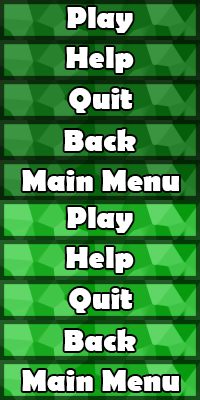
<style>
.page{position:relative;width:200px;height:400px}
.page>*{position:absolute;margin:0}
.t1{font:30px "BerlinSansFB-Bold";color:#ffffff}
</style>
<div class="page">
<p class="t1" style="left:67px;top:7px;width:66px;height:26px">Play</p>
<p class="t1" style="left:66px;top:47px;width:68px;height:26px">Help</p>
<p class="t1" style="left:69px;top:88px;width:64px;height:25px">Quit</p>
<p class="t1" style="left:64px;top:129px;width:72px;height:22px">Back</p>
<p class="t1" style="left:22px;top:170px;width:157px;height:21px">Main Menu</p>
<p class="t1" style="left:67px;top:207px;width:66px;height:26px">Play</p>
<p class="t1" style="left:66px;top:247px;width:68px;height:26px">Help</p>
<p class="t1" style="left:69px;top:288px;width:64px;height:25px">Quit</p>
<p class="t1" style="left:64px;top:329px;width:72px;height:22px">Back</p>
<p class="t1" style="left:22px;top:370px;width:157px;height:21px">Main Menu</p>
</div>
